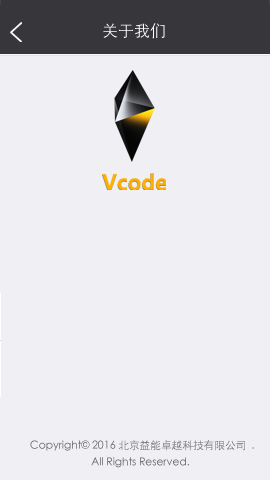
<style>
.page{position:relative;width:270px;height:480px;background:#efeff4}
.page>*{position:absolute;margin:0}
.t1{font:16px "STXihei";color:#ffffff}
.t2{font:10.7px/16.9px "STXihei";color:#676767}
</style>
<div class="page">
<p class="t1" style="left:103px;top:23px;width:62px;height:16px">关于我们</p>
<p class="t2" style="left:30px;top:440px;width:224px;height:28px">Copyright© 2016 北京益能卓越科技有限公司  .<br>                       All Rights Reserved.</p>
</div>
